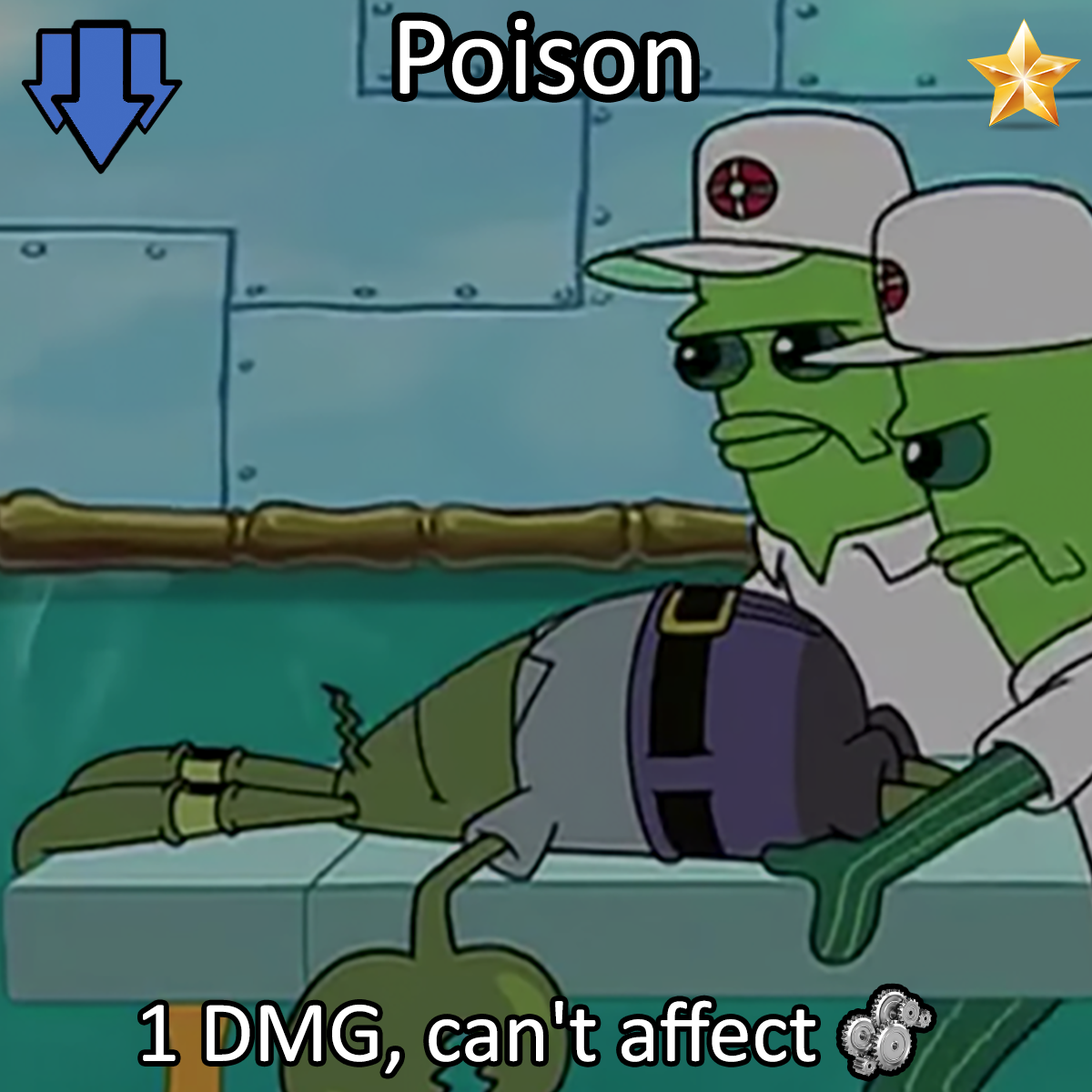
<style>
.page{position:relative;width:1092px;height:1092px}
.page>*{position:absolute;margin:0}
.t1{font:196.6px "Calibri";color:#ffffff}
.t2{font:150.1px "Calibri";color:#ffffff}
.t3{font:150.1px "stoogedings-Regular";color:#ffffff}
</style>
<div class="page">
<p class="t1" style="left:399px;top:18px;width:293px;height:77px">Poison</p>
<p class="t2" style="left:143px;top:988px;width:789px;height:89px">1 DMG, can't affect <span class="t3">[machine]</span></p>
</div>
